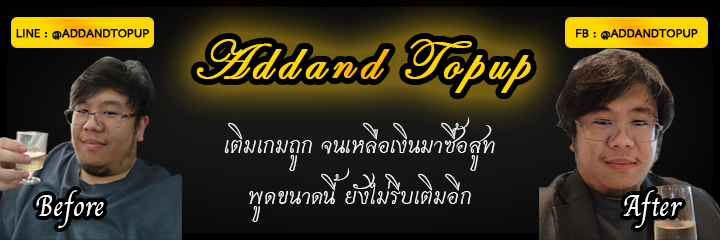
<style>
.page{position:relative;width:720px;height:240px}
.page>*{position:absolute;margin:0}
.t1{font:16.4px "THSarabunPSK-Bold";color:#000000;font-weight:bold}
.t2{font:56px "EdwardianScriptITC";letter-spacing:0.1em;color:#ffd600;font-weight:bold}
.t3{font:32px "THCharmonman";color:#ffffff}
.t4{font:40.8px "THCharmofAU";color:#ffffff}
</style>
<div class="page">
<p class="t1" style="left:16px;top:29px;width:134px;height:11px">LINE : @ADDANDTOPUP</p>
<p class="t1" style="left:576px;top:29px;width:122px;height:11px">FB : @ADDANDTOPUP</p>
<p class="t2" style="left:196px;top:39px;width:335px;height:54px">Addand Topup</p>
<p class="t3" style="left:224px;top:117px;width:271px;height:54px">เติมเกมถูก จนเหลือเงินมาซื้อสูท</p>
<p class="t3" style="left:249px;top:168px;width:222px;height:54px">พูดขนาดนี้ ยังไม่รีบเติมอีก</p>
<p class="t4" style="left:36px;top:190px;width:68px;height:38px">Before</p>
<p class="t4" style="left:623px;top:190px;width:59px;height:38px">After</p>
</div>
